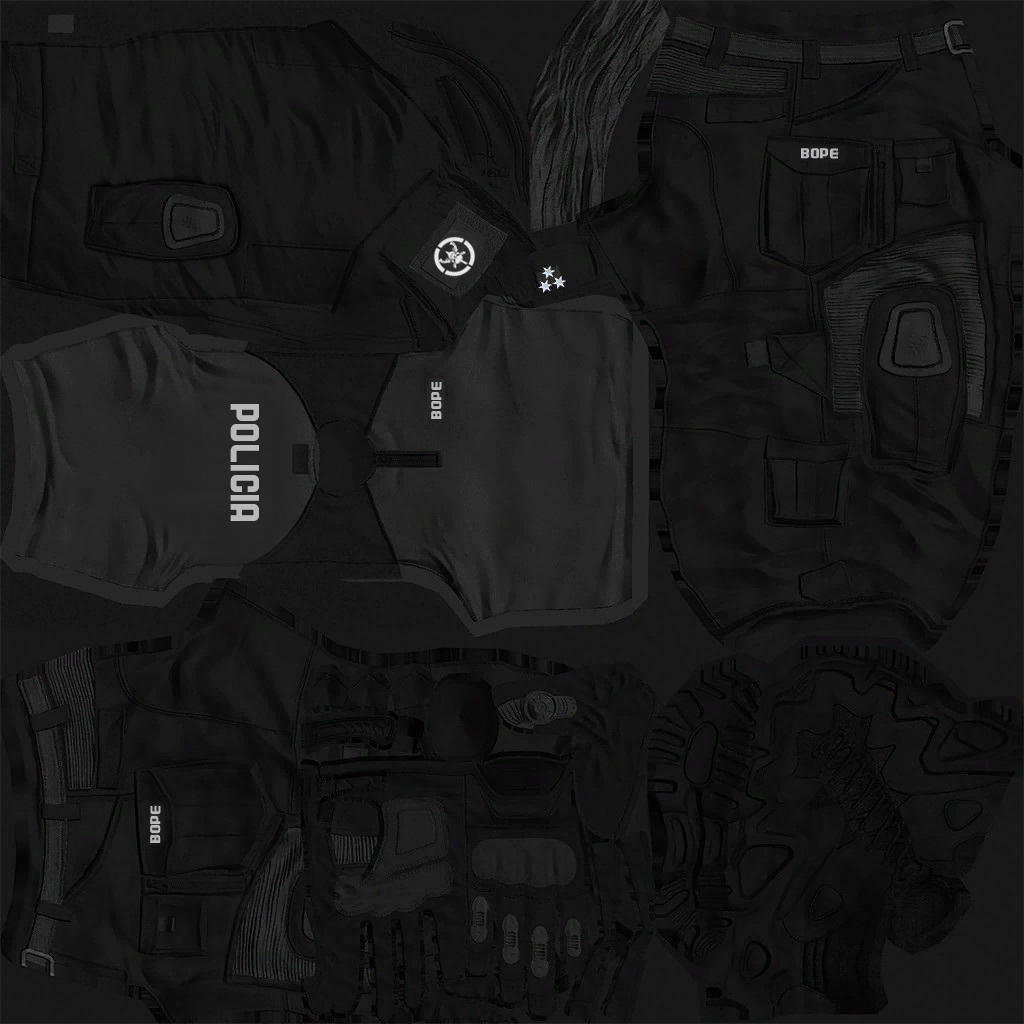
<style>
.page{position:relative;width:1024px;height:1024px}
.page>*{position:absolute;margin:0}
.t1{font:12.9px "A25-SQUANOVA";color:#b9b8b8;scale:1.31 1}
.t2{font:36px "A25-SQUANOVA";color:#b9b8b8}
</style>
<div class="page">
<p class="t1" style="left:431px;top:382px;width:11px;height:37px;rotate:-90deg">BOPE</p>
<p class="t2" style="left:230px;top:404px;width:29px;height:117px;rotate:90deg">POLICIA</p>
</div>
